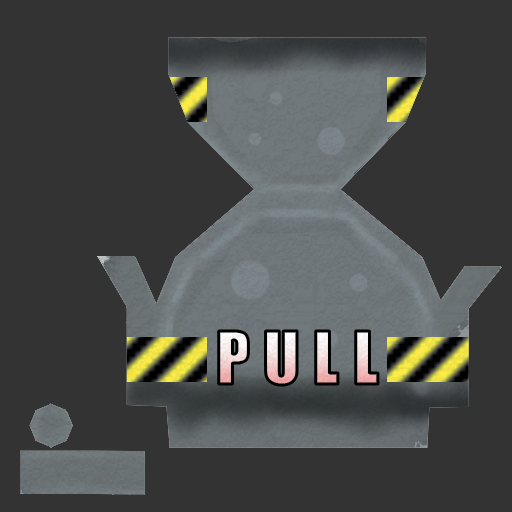
<style>
.page{position:relative;width:512px;height:512px;background:#333333}
.page>*{position:absolute;margin:0}
.t1{font:67.3px "Impact";letter-spacing:0.2em}
</style>
<div class="page">
<p class="t1" style="left:218px;top:331px;width:160px;height:54px">PULL</p>
</div>
